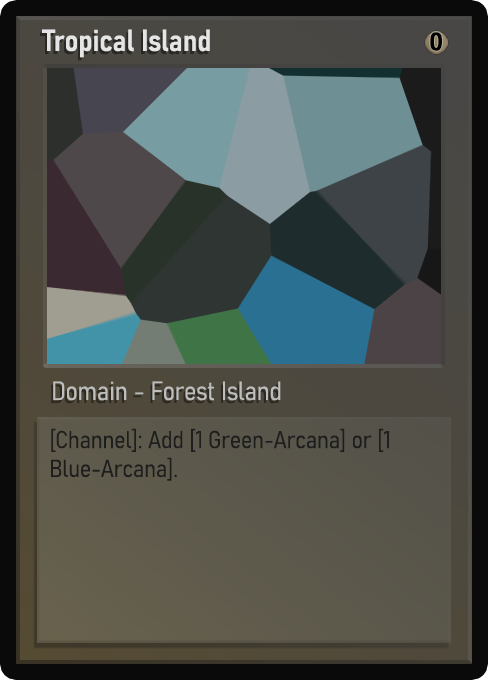
<style>
.page{position:relative;width:488px;height:680px}
.page>*{position:absolute;margin:0}
.t1{font:30px "Bahnschrift-SemiBoldSemiCondensed";color:#f2f2f2;font-weight:bold}
.t2{font:25px "WTRRoycroft";color:#000000;font-weight:bold;scale:1.09 1}
.t3{font:26px "Bahnschrift-LightSemiCondensed";color:#c8c8c8;font-weight:bold}
.t4{font:24px "Bahnschrift-LightSemiCondensed";color:#1e1e1e;font-weight:bold}
</style>
<div class="page">
<p class="t1" style="left:42px;top:29px;width:168px;height:29px;opacity:0.9">Tropical Island</p>
<p class="t2" style="left:430px;top:32px;width:12px;height:19px">0</p>
<p class="t3" style="left:53px;top:381px;width:228px;height:20px;opacity:0.9">Domain - Forest Island</p>
<p class="t4" style="left:51px;top:428px;width:338px;height:53px">[Channel]: Add [1 Green-Arcana] or [1 Blue-Arcana].</p>
</div>
